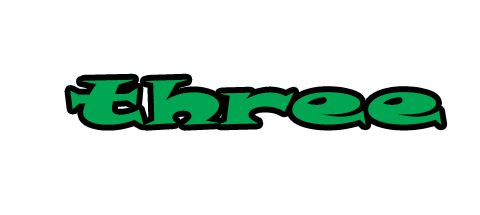
<style>
.page{position:relative;width:480px;height:215px;background:#ffffff}
.page>*{position:absolute;margin:0}
.t1{font:60px "SnapITC-Regular";color:#00a651;scale:2 1}
</style>
<div class="page">
<p class="t1" style="left:70px;top:79px;width:372px;height:46px">three</p>
</div>
